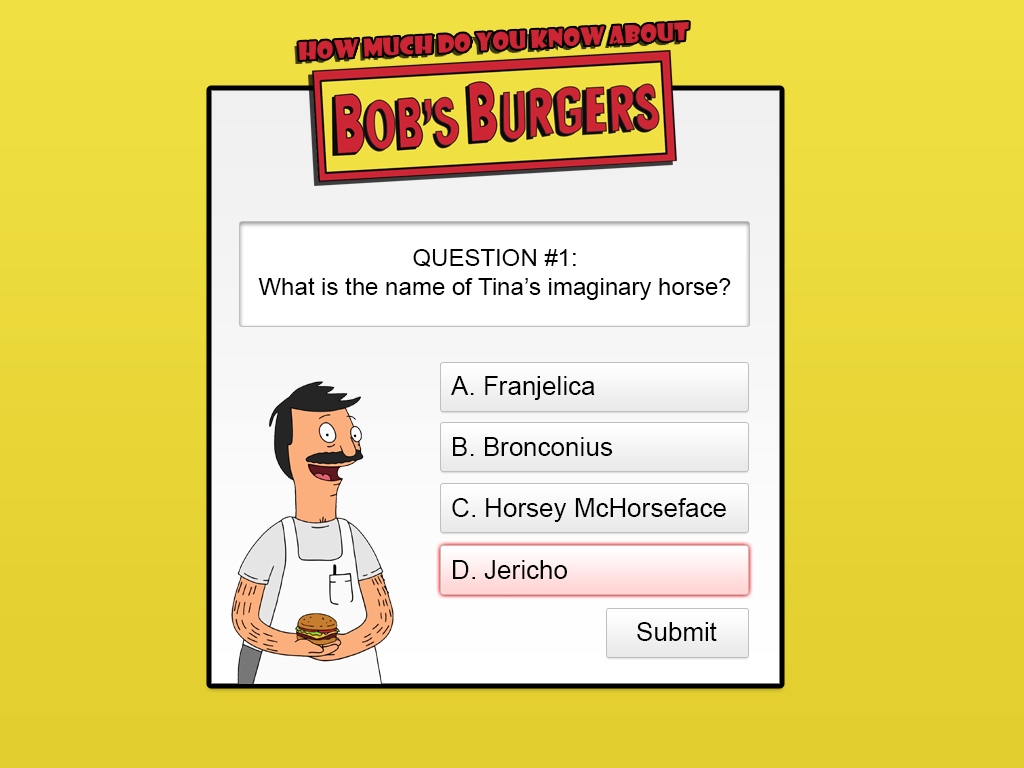
<style>
.page{position:relative;width:1024px;height:768px}
.page>*{position:absolute;margin:0}
.t1{font:24px "ArialMT";color:#000000}
.t2{font:26px "ArialMT";color:#000000}
</style>
<div class="page">
<p class="t1" style="left:258px;top:249px;width:473px;height:51px;text-align:center">QUESTION #1:<br>What is the name of Tina’s imaginary horse?</p>
<p class="t2" style="left:451px;top:376px;width:144px;height:24px">A. Franjelica</p>
<p class="t2" style="left:453px;top:437px;width:160px;height:19px">B. Bronconius</p>
<p class="t2" style="left:452px;top:498px;width:274px;height:24px">C. Horsey McHorseface</p>
<p class="t2" style="left:453px;top:560px;width:114px;height:19px">D. Jericho</p>
<p class="t2" style="left:637px;top:622px;width:80px;height:19px">Submit</p>
</div>
